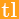
<style>
.page{position:relative;width:19px;height:19px;background:#ff9f16}
.page>*{position:absolute;margin:0}
.t1{font:20.8px "CenturySchoolbook";letter-spacing:0.05em;color:#ffffff}
</style>
<div class="page">
<p class="t1" style="left:1px;top:2px;width:16px;height:15px">tl</p>
</div>
